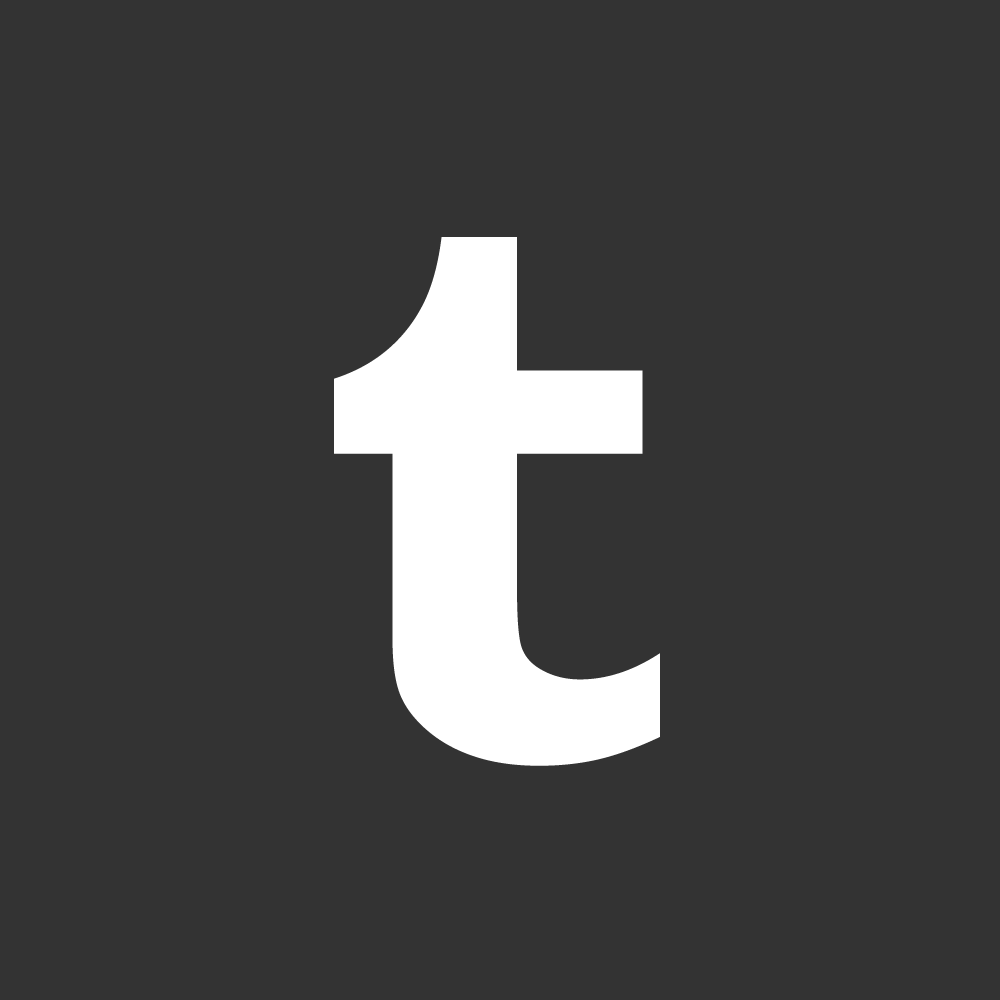
<style>
.page{position:relative;width:1000px;height:1000px;background:#333333}
.page>*{position:absolute;margin:0}
.t1{font:797.6px "BookmanOldStyle-Bold";letter-spacing:-0.01em;color:#ffffff}
</style>
<div class="page">
<p class="t1" style="left:334px;top:237px;width:326px;height:529px">t</p>
</div>
